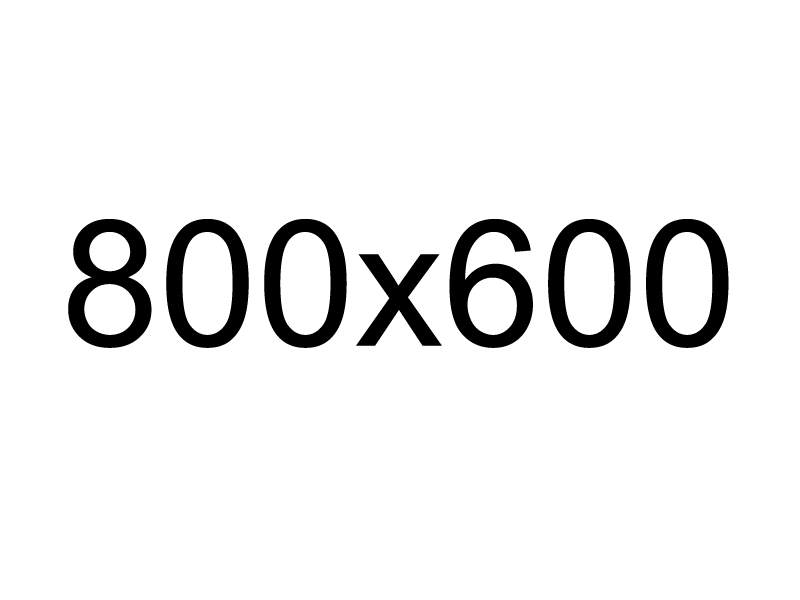
<style>
.page{position:relative;width:800px;height:600px;background:#ffffff}
.page>*{position:absolute;margin:0}
.t1{font:176.1px "ArialMT";color:#000000}
</style>
<div class="page">
<p class="t1" style="left:68px;top:219px;width:661px;height:129px">800x600</p>
</div>
